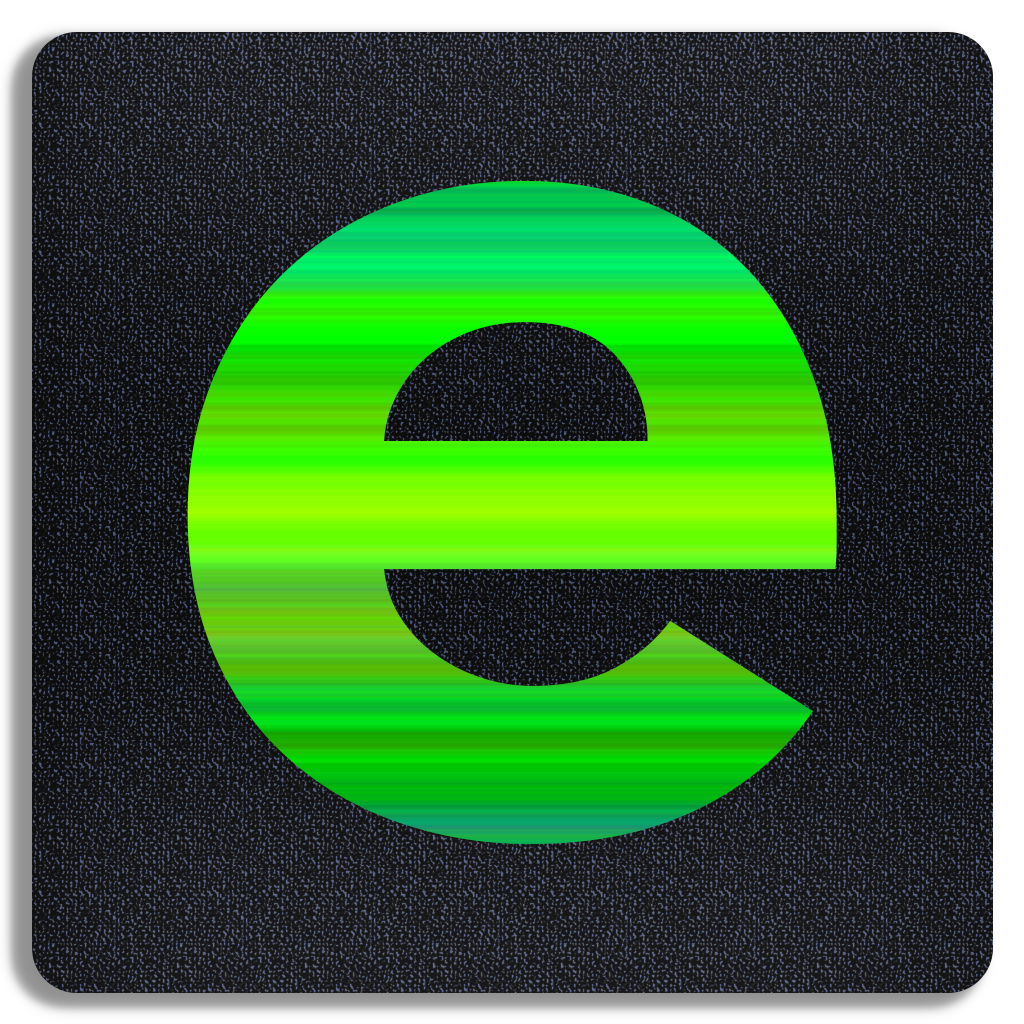
<style>
.page{position:relative;width:1024px;height:1024px}
.page>*{position:absolute;margin:0}
.t1{font:1250px "AvenirNext-Bold"}
</style>
<div class="page">
<p class="t1" style="left:187px;top:181px;width:650px;height:663px">e</p>
</div>
